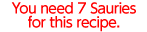
<style>
.page{position:relative;width:147px;height:32px;background:#ffffff}
.page>*{position:absolute;margin:0}
.t1{font:14px/14px "UDShinGoPro-Medium";letter-spacing:-0.04em;color:#ff0000}
</style>
<div class="page">
<p class="t1" style="left:11px;top:2px;width:125px;height:30px;text-align:center">You need 7 Sauries<br>for this recipe.</p>
</div>
